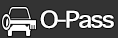
<style>
.page{position:relative;width:118px;height:38px;background:#333333}
.page>*{position:absolute;margin:0}
.t1{font:30.6px "AppleSymbols";letter-spacing:-0.075em;color:#ffffff;font-weight:bold;scale:1.18 1}
</style>
<div class="page">
<p class="t1" style="left:40px;top:10px;width:74px;height:19px">O-Pass</p>
</div>
